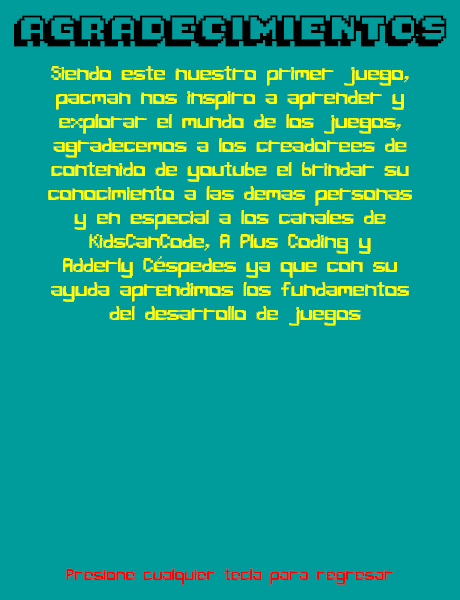
<style>
.page{position:relative;width:460px;height:600px;background:#009b9b}
.page>*{position:absolute;margin:0}
.t1{font:20px "Pixelmania";color:#000000}
.t2{font:20px "PixelBug";color:#ffff00}
.t3{font:16px "PixelBug";color:#ff0000}
</style>
<div class="page">
<p class="t1" style="left:14px;top:15px;width:433px;height:32px">AGRADECIMIENTOS</p>
<p class="t2" style="left:48px;top:66px;width:364px;height:260px;text-align:center">Siendo este nuestro primer juego, <br>pacman nos inspiro a aprender y <br>explorar el mundo de los juegos, <br>agradecemos a los creadorees de <br>contenido de youtube el brindar su <br>conocimiento a las demas personas <br>y en especial a los canales de <br>KidsCanCode, A Plus Coding y <br>Adderly Céspedes ya que con su <br>ayuda aprendimos los fundamentos <br>del desarrollo de juegos</p>
<p class="t3" style="left:66px;top:568px;width:328px;height:17px">Presione cualquier tecla para regresar</p>
</div>
